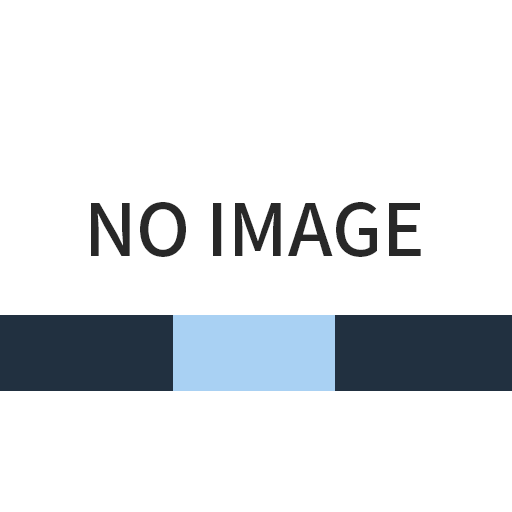
<style>
.page{position:relative;width:512px;height:512px;background:#ffffff}
.page>*{position:absolute;margin:0}
.t1{font:71.5px "NotoSansCJKhk-Medium";color:#282828}
</style>
<div class="page">
<p class="t1" style="left:91px;top:202px;width:330px;height:55px">NO IMAGE</p>
</div>
